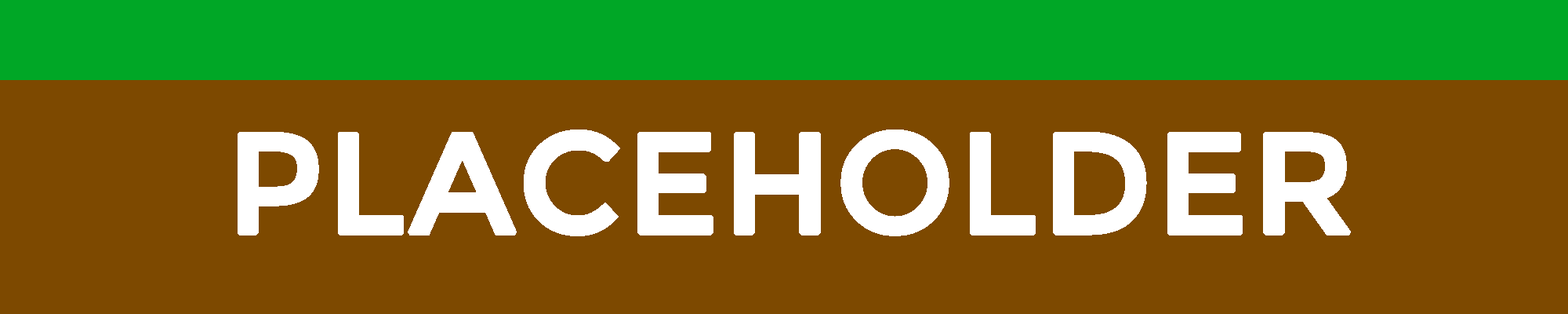
<style>
.page{position:relative;width:1568px;height:314px;background:#7d4900}
.page>*{position:absolute;margin:0}
.t1{font:141.1px "Montserrat-Regular";color:#ffffff;font-weight:bold}
</style>
<div class="page">
<p class="t1" style="left:238px;top:129px;width:1113px;height:107px">PLACEHOLDER</p>
</div>
